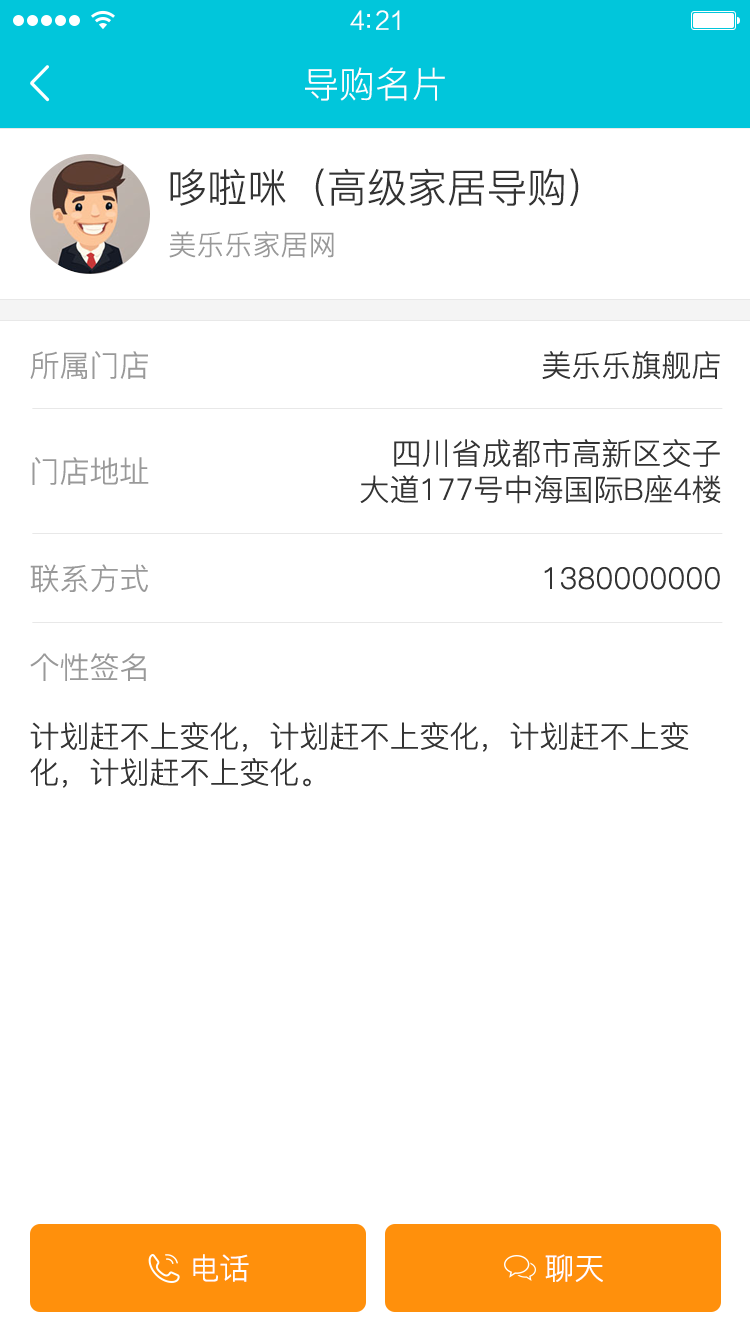
<style>
.page{position:relative;width:750px;height:1334px;background:#ffffff}
.page>*{position:absolute;margin:0}
.t1{font:25px "FZLTXHK";letter-spacing:-0.02em;color:#ffffff}
.t2{font:36px "PingFang-SC-Regular";color:#ffffff}
.t3{font:40px "PingFang-SC-Regular";color:#333333}
.t4{font:28px "PingFang-SC-Regular";color:#999999}
.t5{font:30px "PingFang-SC-Regular";color:#999999}
.t6{font:30px "PingFang-SC-Regular";color:#333333}
.t7{font:30px "PingFang-SC-Regular";color:#ffffff}
</style>
<div class="page">
<p class="t1" style="left:350px;top:10px;width:50px;height:20px">4:21</p>
<p class="t2" style="left:305px;top:67px;width:140px;height:34px">导购名片</p>
<p class="t3" style="left:170px;top:168px;width:409px;height:38px">哆啦咪（高级家居导购）</p>
<p class="t4" style="left:169px;top:231px;width:165px;height:27px">美乐乐家居网</p>
<p class="t5" style="left:30px;top:351px;width:118px;height:28px">所属门店</p>
<p class="t6" style="left:542px;top:351px;width:178px;height:29px">美乐乐旗舰店</p>
<p class="t6" style="left:360px;top:439px;width:361px;height:65px;text-align:right">四川省成都市高新区交子<br>大道177号中海国际B座4楼</p>
<p class="t5" style="left:32px;top:457px;width:117px;height:28px">门店地址</p>
<p class="t5" style="left:30px;top:564px;width:118px;height:29px">联系方式</p>
<p class="t6" style="left:544px;top:567px;width:176px;height:23px">1380000000</p>
<p class="t5" style="left:30px;top:653px;width:116px;height:28px">个性签名</p>
<p class="t6" style="left:30px;top:722px;width:659px;height:66px">计划赶不上变化，计划赶不上变化，计划赶不上变<br>化，计划赶不上变化。</p>
<p class="t7" style="left:193px;top:1254px;width:56px;height:28px">电话</p>
<p class="t7" style="left:545px;top:1254px;width:58px;height:28px">聊天</p>
</div>
